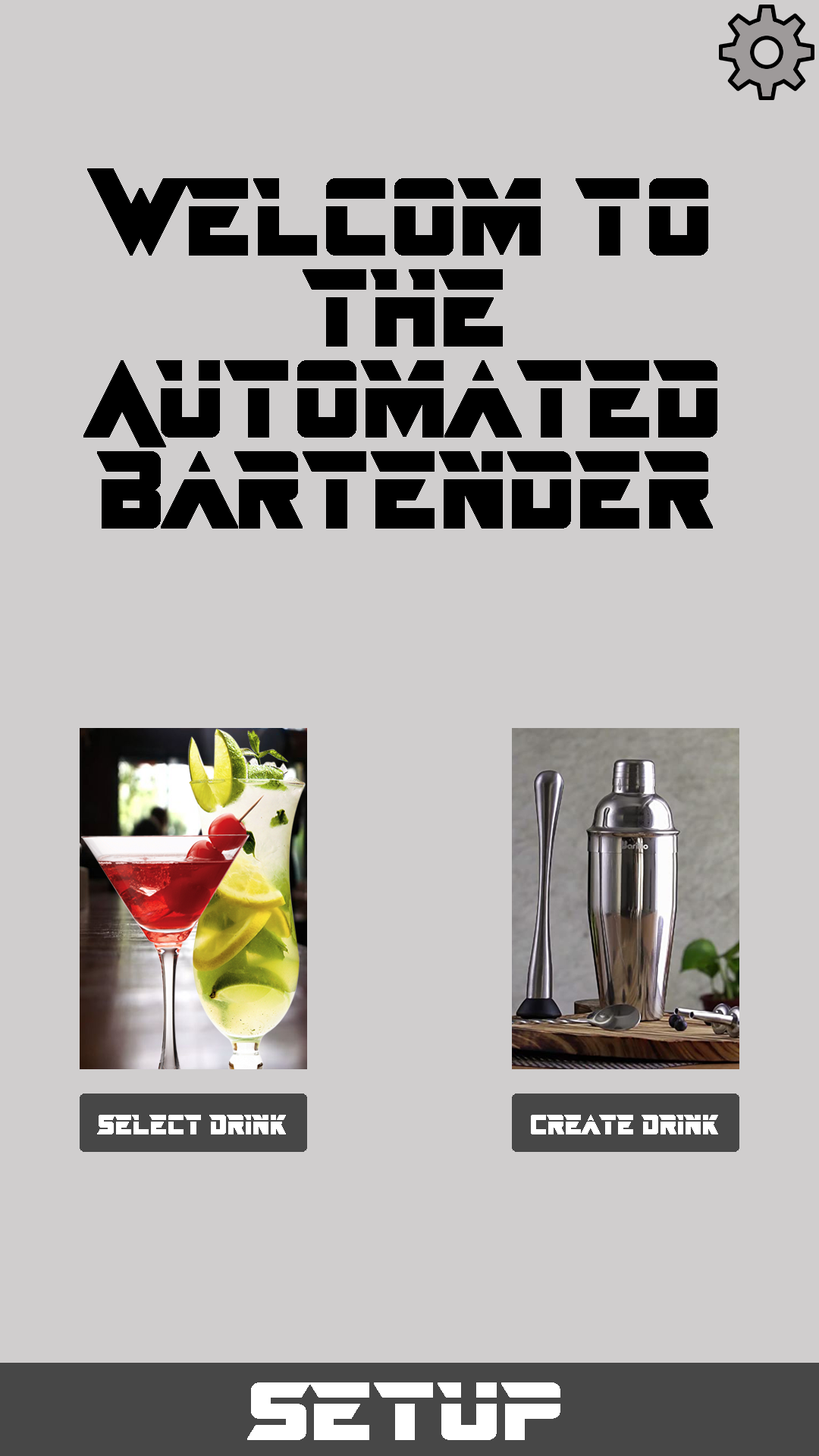
<style>
.page{position:relative;width:819px;height:1456px;background:#d0cece}
.page>*{position:absolute;margin:0}
.t1{font:75.8px "Just-In-The-Firestorm";color:#000000;font-weight:bold}
.t2{font:19px "Just-In-The-Firestorm";color:#ffffff;font-weight:bold}
.t3{font:56.9px "Just-In-The-Firestorm";color:#ffffff;font-weight:bold;scale:1.24 1}
</style>
<div class="page">
<p class="t1" style="left:83px;top:168px;width:634px;height:361px;text-align:center">Welcom to the Automated Bartender</p>
<p class="t2" style="left:97px;top:1115px;width:189px;height:19px">Select Drink</p>
<p class="t2" style="left:531px;top:1115px;width:187px;height:19px">Create Drink</p>
<p class="t3" style="left:247px;top:1382px;width:313px;height:58px">Setup</p>
</div>
